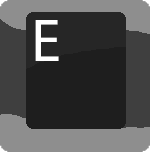
<style>
.page{position:relative;width:150px;height:152px;background:#1e1e1e}
.page>*{position:absolute;margin:0}
.t1{font:60px "MyriadPro-Regular";color:#ffffff}
</style>
<div class="page">
<p class="t1" style="left:35px;top:20px;width:24px;height:41px">E</p>
</div>
